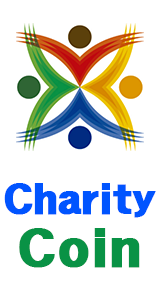
<style>
.page{position:relative;width:160px;height:300px;background:#ffffff}
.page>*{position:absolute;margin:0}
.t1{font:35px "HeadlineR-HM";letter-spacing:-0.05em;color:#0054ff;font-weight:bold}
.t2{font:45px "HeadlineR-HM";color:#099245;font-weight:bold}
</style>
<div class="page">
<p class="t1" style="left:4px;top:183px;width:152px;height:35px">Charity</p>
<p class="t2" style="left:19px;top:228px;width:121px;height:40px">Coin</p>
</div>
